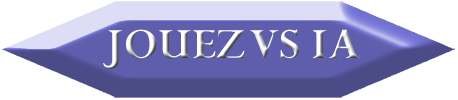
<style>
.page{position:relative;width:458px;height:100px;background:#ffffff}
.page>*{position:absolute;margin:0}
.t1{font:47.4px "Perpetua-Bold"}
</style>
<div class="page">
<p class="t1" style="left:103px;top:29px;width:257px;height:40px">JOUEZ VS IA</p>
</div>
